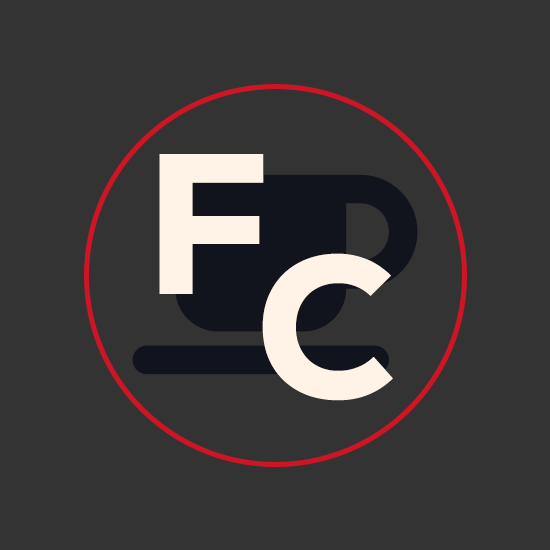
<style>
.page{position:relative;width:550px;height:550px;background:#333333}
.page>*{position:absolute;margin:0}
.t1{font:200px "Nexa-Heavy";color:#fff3e8}
</style>
<div class="page">
<p class="t1" style="left:159px;top:154px;width:105px;height:140px">F</p>
<p class="t1" style="left:262px;top:253px;width:131px;height:148px">C</p>
</div>
